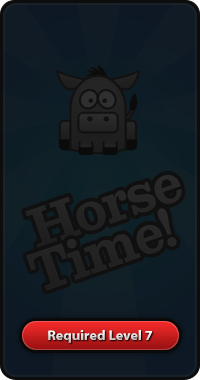
<style>
.page{position:relative;width:200px;height:380px}
.page>*{position:absolute;margin:0}
.t1{font:54.7px "Clarendon-Bold";color:#242424;scale:0.88 1}
.t2{font:54.7px "Clarendon-Bold";color:#232323;scale:0.88 1}
.t3{font:14px "MyriadWebPro-Bold"}
.t4{font:14px "MyriadWebPro-Bold";color:#dcdcdc}
</style>
<div class="page">
<p class="t1" style="left:25px;top:175px;width:157px;height:74px;rotate:-19deg">Horse</p>
<p class="t2" style="left:26px;top:208px;width:151px;height:83px;rotate:-19deg">Time!</p>
<p class="t3" style="left:0px;top:328px;width:200px;height:19px">Play 30 Lines</p>
<p class="t4" style="left:0px;top:329px;width:200px;height:19px">Required Level 7</p>
</div>
